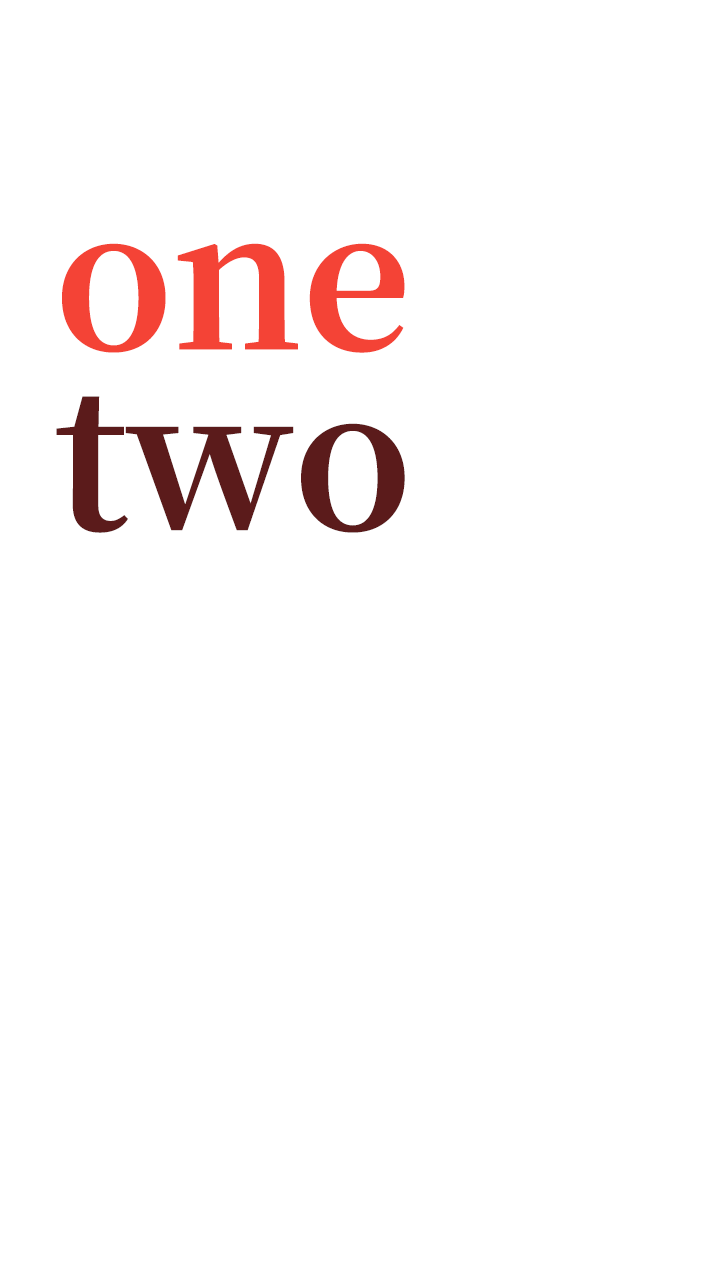
<style>
.page{position:relative;width:720px;height:1280px;background:#ffffff}
.page>*{position:absolute;margin:0}
.t1{font:191.9px "NotoSerifCJKsc-Bold";letter-spacing:-0.005em;color:#f44336}
.t2{font:191.9px "NotoSerifCJKsc-Bold";letter-spacing:-0.005em;color:#5b1b1b}
</style>
<div class="page">
<p class="t1" style="left:62px;top:243px;width:343px;height:110px">one</p>
<p class="t2" style="left:56px;top:396px;width:349px;height:137px">two</p>
</div>
